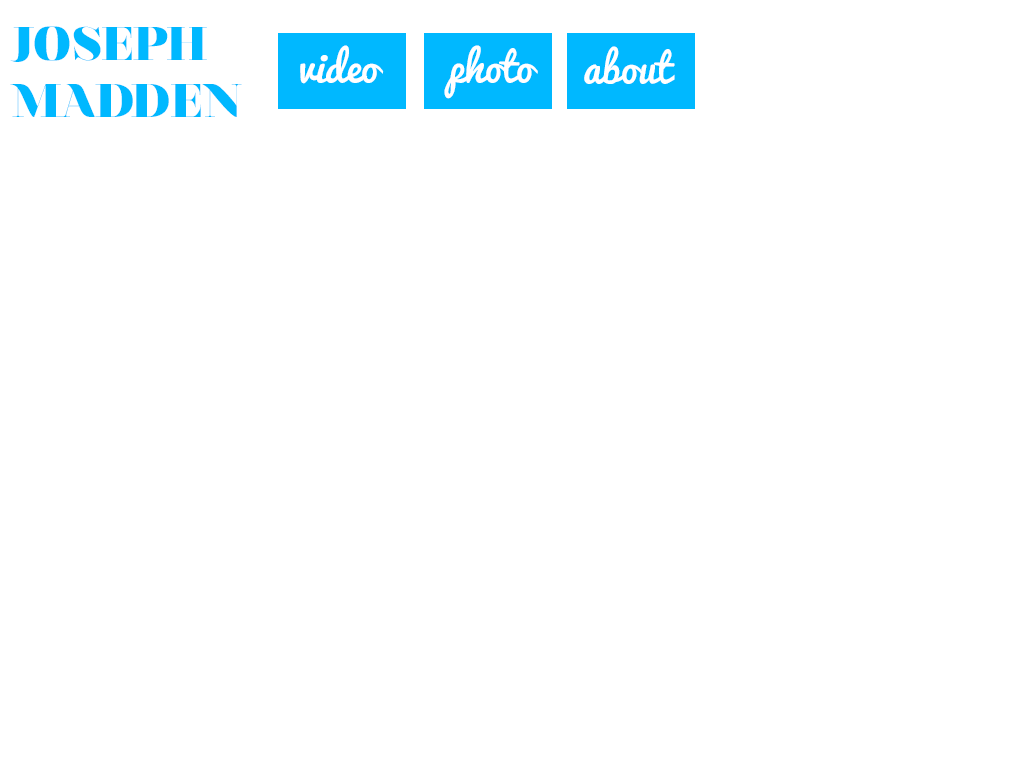
<style>
.page{position:relative;width:1024px;height:768px;background:#ffffff}
.page>*{position:absolute;margin:0}
.t1{font:47.2px "NouvelleVague-Black";color:#00b8ff;text-transform:uppercase}
.t2{font:40px "Pacifico";color:#ffffff}
.t3{font:39.9px "Pacifico";color:#ffffff}
</style>
<div class="page">
<p class="t1" style="left:10px;top:26px;width:232px;height:91px">Joseph<br>Madden</p>
<p class="t2" style="left:300px;top:45px;width:84px;height:39px">video</p>
<p class="t2" style="left:444px;top:45px;width:94px;height:54px">photo</p>
<p class="t3" style="left:584px;top:46px;width:91px;height:38px">about</p>
</div>
